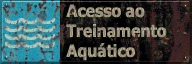
<style>
.page{position:relative;width:192px;height:64px}
.page>*{position:absolute;margin:0}
.t1{font:16.8px/20px "Verdana-Bold";letter-spacing:-0.06em;color:#9b917c;font-weight:bold;scale:0.87 1}
</style>
<div class="page">
<p class="t1" style="left:66px;top:4px;width:101px;height:57px">Acesso ao<br>Treinamento<br>Aquático</p>
</div>
